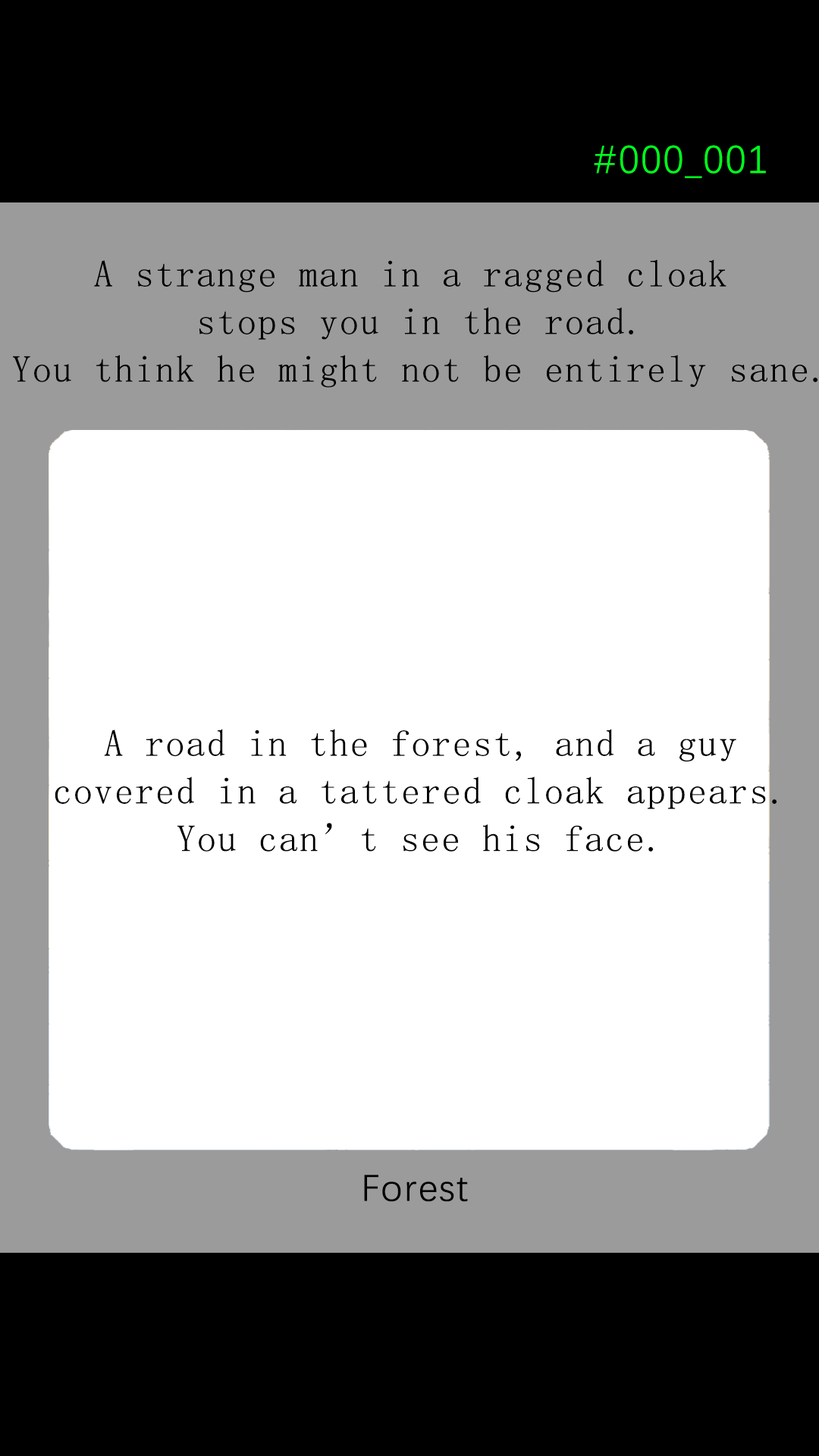
<style>
.page{position:relative;width:819px;height:1456px;background:#ffffff}
.page>*{position:absolute;margin:0}
.t1{font:39.2px "DengXian-Regular";letter-spacing:0.04em;color:#00ff1e}
.t2{font:37.9px/47.6px "SimSun";letter-spacing:0.04em;color:#000000}
.t3{font:37.9px "DengXian-Regular";letter-spacing:0.04em;color:#000000}
</style>
<div class="page">
<p class="t1" style="left:594px;top:145px;width:172px;height:33px">#000_001</p>
<p class="t2" style="left:13px;top:259px;width:805px;height:129px;text-align:center">A strange man in a ragged cloak <br>stops you in the road.<br>You think he might not be entirely sane.</p>
<p class="t2" style="left:55px;top:729px;width:722px;height:123px;text-align:center">A road in the forest, and a guy<br>covered in a tattered cloak appears.<br>You can’t see his face.</p>
<p class="t3" style="left:364px;top:1175px;width:104px;height:27px">Forest</p>
</div>
